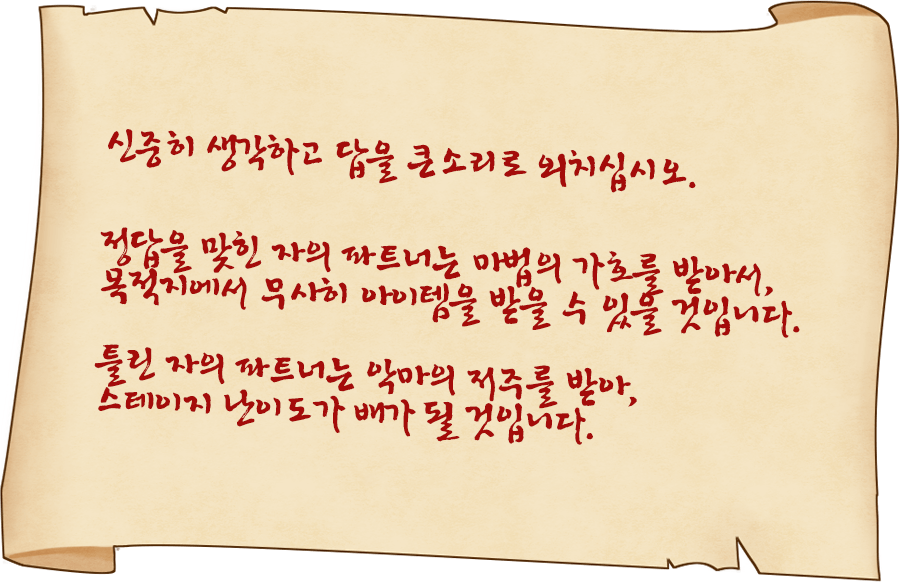
<style>
.page{position:relative;width:900px;height:582px}
.page>*{position:absolute;margin:0}
.t1{font:48.3px/39px "YDIYuroM";letter-spacing:-0.08em;color:#a40c0a}
.t2{font:48.3px/50px "YDIYuroM";letter-spacing:-0.08em;color:#a40c0a}
</style>
<div class="page">
<p class="t1" style="left:94px;top:129px;width:706px;height:316px;rotate:3deg"><span class="t2">신중히 생각하고 답을 큰소리로 외치십시오.<br><br></span>정답을 맞힌 자의 파트너는 마법의 가호를 받아서,<br>목적지에서 무사히 아이템을 받을 수 있을 것입니다.<br><br>틀린 자의 파트너는 악마의 저주를 받아,<br>스테이지 난이도가 배가 될 것입니다.</p>
</div>
